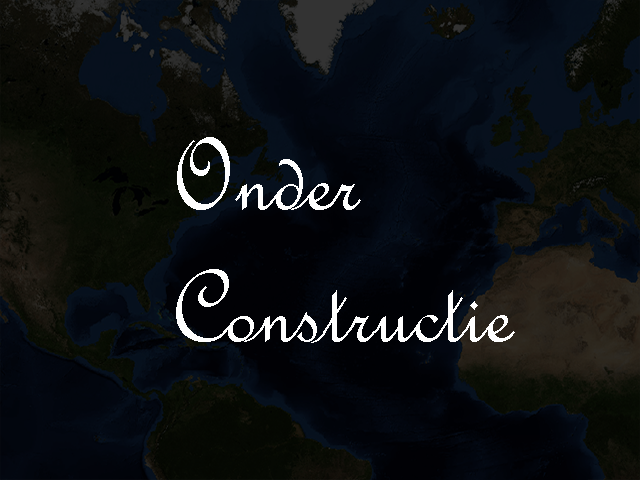
<style>
.page{position:relative;width:640px;height:480px}
.page>*{position:absolute;margin:0}
.t1{font:110px "FrenchScriptMT";color:#ffffff}
</style>
<div class="page">
<p class="t1" style="left:176px;top:137px;width:339px;height:206px">Onder <br>Constructie</p>
</div>
